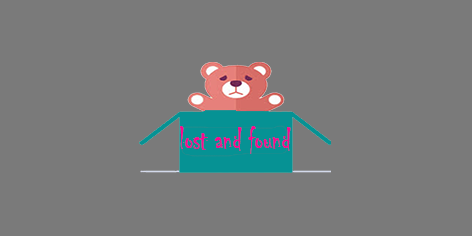
<style>
.page{position:relative;width:472px;height:236px;background:#7a7a7a}
.page>*{position:absolute;margin:0}
.t1{font:34.6px "Chiller-Regular";color:#fa0790;scale:0.78 1}
</style>
<div class="page">
<p class="t1" style="left:180px;top:126px;width:111px;height:28px">lost and found</p>
</div>
